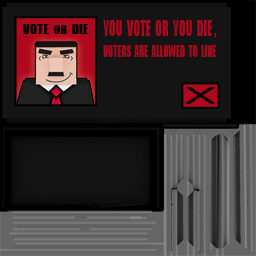
<style>
.page{position:relative;width:256px;height:256px;background:#141414}
.page>*{position:absolute;margin:0}
.t1{font:13.3px "Impact";color:#000000}
.t2{font:12px "Impact";color:#000000}
.t3{font:15.3px/0.8px "Impact";color:#b0091e;scale:0.61 1}
.t4{font:20.2px/0.8px "Impact";color:#b0091e;scale:0.61 1}
</style>
<div class="page">
<p class="t1" style="left:23px;top:24px;width:66px;height:10px">VOTE  <span class="t2">OR</span>  DIE</p>
<p class="t3" style="left:103px;top:20px;width:114px;height:37px"><span class="t4">YOU  VOTE  OR  YOU  DIE ,  <br><br><br><br><br><br><br><br><br><br><br><br><br><br><br><br><br><br><br><br><br><br><br><br><br><br></span>VOTERS  ARE  ALLOWED  TO  LIVE</p>
</div>
